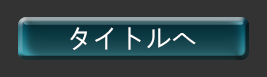
<style>
.page{position:relative;width:267px;height:77px;background:#333333}
.page>*{position:absolute;margin:0}
.t1{font:26px "MicrosoftYaHeiUI";color:#ffffff}
</style>
<div class="page">
<p class="t1" style="left:70px;top:27px;width:126px;height:23px">タイトルへ</p>
</div>
